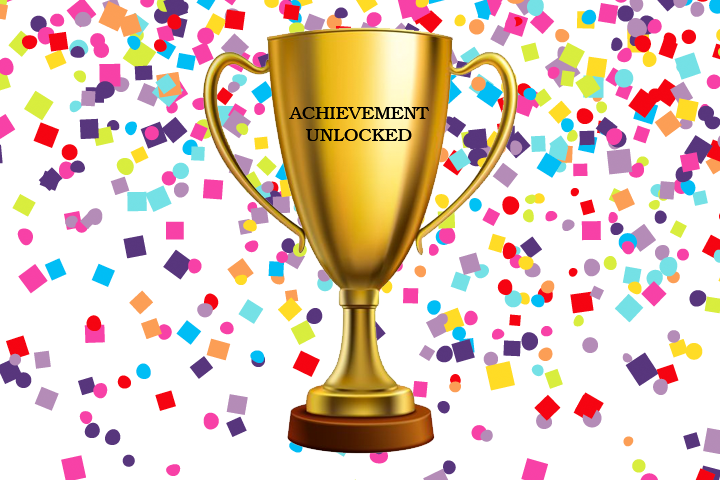
<style>
.page{position:relative;width:720px;height:480px;background:#ffffff}
.page>*{position:absolute;margin:0}
.t1{font:18px "Bookman-Light";color:#000000}
</style>
<div class="page">
<p class="t1" style="left:289px;top:107px;width:140px;height:34px;text-align:center">ACHIEVEMENT<br>UNLOCKED</p>
<p class="t1" style="left:289px;top:107px;width:140px;height:34px;text-align:center">ACHIEVEMENT<br>UNLOCKED</p>
</div>
